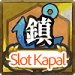
<style>
.page{position:relative;width:75px;height:75px}
.page>*{position:absolute;margin:0}
.t1{font:16px "AdobeClean-Regular";letter-spacing:-0.08em;color:#ff5a00}
</style>
<div class="page">
<p class="t1" style="left:10px;top:53px;width:56px;height:16px">Slot Kapal</p>
</div>
